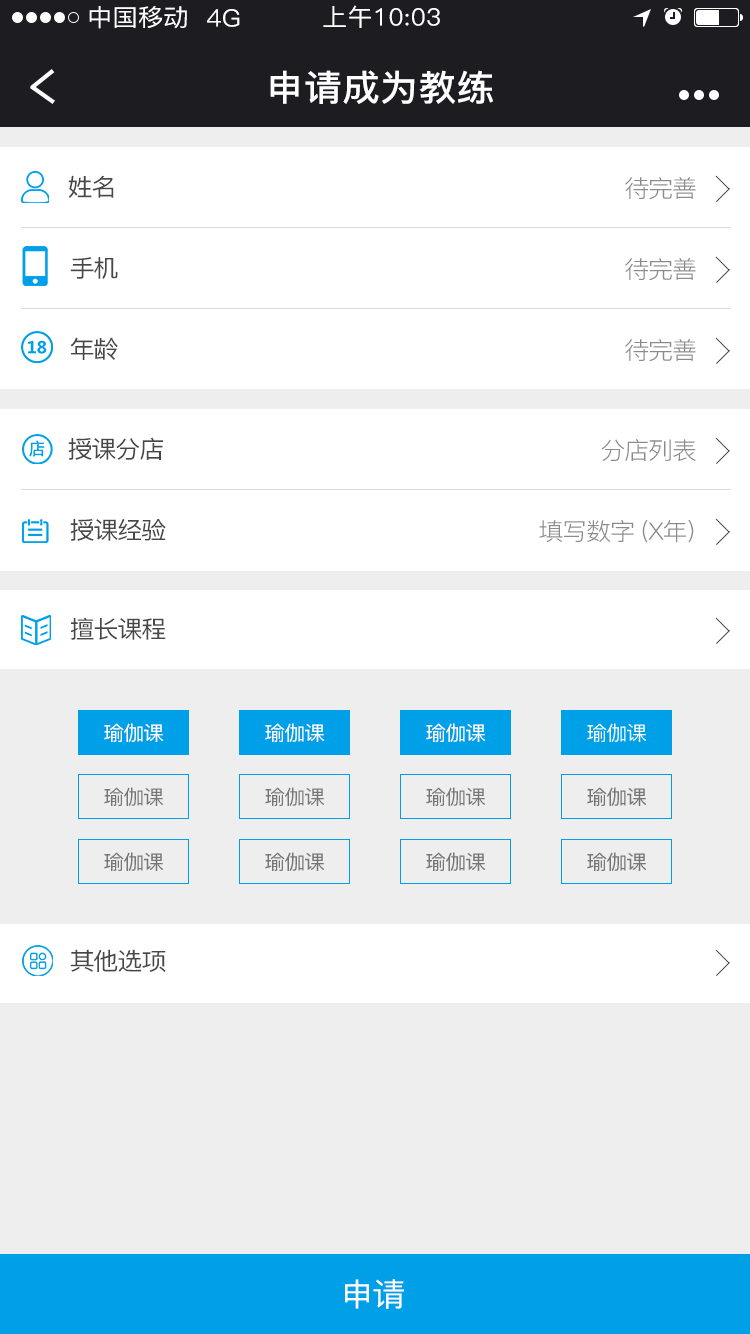
<style>
.page{position:relative;width:750px;height:1334px;background:#ffffff}
.page>*{position:absolute;margin:0}
.t1{font:24px "PingFang-SC-Medium";letter-spacing:0.01em;color:#ffffff;scale:1.05 1}
.t2{font:36px "PingFang-SC-Bold";letter-spacing:0.01em;color:#ffffff;scale:1.05 1}
.t3{font:24px "PingFang-SC-Medium";letter-spacing:-0.05em;color:#474747;scale:1.05 1}
.t4{font:24px "PingFang-SC-Regular";letter-spacing:-0.05em;color:#8c8b8b;scale:1.05 1}
.t5{font:24px "PingFang-SC-Regular";letter-spacing:-0.05em;color:#777575;scale:1.05 1}
.t6{font:20px "PingFang-SC-Medium";letter-spacing:-0.05em;color:#ffffff;scale:1.05 1}
.t7{font:20px "PingFang-SC-Medium";letter-spacing:-0.05em;color:#777676;scale:1.05 1}
.t8{font:32px "PingFang-SC-Medium";letter-spacing:-0.05em;color:#ffffff;scale:1.05 1}
</style>
<div class="page">
<p class="t1" style="left:89px;top:6px;width:98px;height:23px">中国移动</p>
<p class="t1" style="left:323px;top:5px;width:117px;height:23px">上午10:03</p>
<p class="t1" style="left:207px;top:9px;width:33px;height:18px">4G</p>
<p class="t2" style="left:270px;top:70px;width:223px;height:34px">申请成为教练</p>
<p class="t3" style="left:68px;top:175px;width:46px;height:23px">姓名</p>
<p class="t4" style="left:625px;top:177px;width:71px;height:23px">待完善</p>
<p class="t3" style="left:70px;top:257px;width:48px;height:22px">手机</p>
<p class="t4" style="left:625px;top:258px;width:71px;height:23px">待完善</p>
<p class="t3" style="left:70px;top:337px;width:48px;height:23px">年龄</p>
<p class="t4" style="left:625px;top:339px;width:71px;height:23px">待完善</p>
<p class="t3" style="left:68px;top:437px;width:95px;height:23px">授课分店</p>
<p class="t4" style="left:601px;top:439px;width:95px;height:22px">分店列表</p>
<p class="t3" style="left:70px;top:519px;width:96px;height:22px">授课经验</p>
<p class="t5" style="left:539px;top:520px;width:155px;height:23px">填写数字 (X年)</p>
<p class="t3" style="left:70px;top:617px;width:96px;height:23px">擅长课程</p>
<p class="t6" style="left:104px;top:723px;width:60px;height:19px">瑜伽课</p>
<p class="t6" style="left:265px;top:723px;width:60px;height:19px">瑜伽课</p>
<p class="t6" style="left:426px;top:723px;width:60px;height:19px">瑜伽课</p>
<p class="t6" style="left:587px;top:723px;width:60px;height:19px">瑜伽课</p>
<p class="t7" style="left:104px;top:787px;width:60px;height:19px">瑜伽课</p>
<p class="t7" style="left:265px;top:787px;width:60px;height:19px">瑜伽课</p>
<p class="t7" style="left:426px;top:787px;width:60px;height:19px">瑜伽课</p>
<p class="t7" style="left:587px;top:787px;width:60px;height:19px">瑜伽课</p>
<p class="t7" style="left:104px;top:852px;width:60px;height:19px">瑜伽课</p>
<p class="t7" style="left:265px;top:852px;width:60px;height:19px">瑜伽课</p>
<p class="t7" style="left:426px;top:852px;width:60px;height:19px">瑜伽课</p>
<p class="t7" style="left:587px;top:852px;width:60px;height:19px">瑜伽课</p>
<p class="t3" style="left:70px;top:949px;width:96px;height:23px">其他选项</p>
<p class="t8" style="left:345px;top:1279px;width:59px;height:30px">申请</p>
</div>
